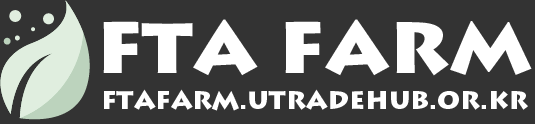
<style>
.page{position:relative;width:535px;height:124px;background:#333333}
.page>*{position:absolute;margin:0}
.t1{font:84px "LithosPro-Black";color:#ffffff}
.t2{font:25.6px "LithosPro-Black";color:#ffffff}
</style>
<div class="page">
<p class="t1" style="left:103px;top:19px;width:429px;height:57px">fta farm</p>
<p class="t2" style="left:104px;top:89px;width:424px;height:22px">FTAFARM.UTRADEHUB.OR.KR</p>
</div>
